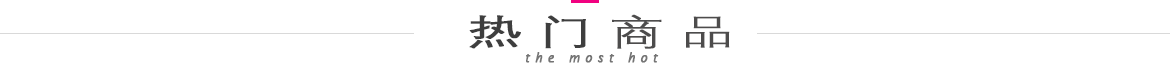
<style>
.page{position:relative;width:1170px;height:68px;background:#ffffff}
.page>*{position:absolute;margin:0}
.t1{font:36px "DengXian-Regular";letter-spacing:0.3em;color:#3e3e3e;font-weight:bold;scale:1.49 1}
.t2{font:36px "DengXian-Light";letter-spacing:0.3em;color:#4d4c4c;font-weight:bold;scale:1.49 1}
.t3{font:12px "LucidaSans-Italic";letter-spacing:0.42em;color:#747474;font-weight:bold}
</style>
<div class="page">
<p class="t1" style="left:469px;top:14px;width:261px;height:35px">热门<span class="t2">商品</span></p>
<p class="t3" style="left:526px;top:52px;width:133px;height:11px">the most hot</p>
</div>
